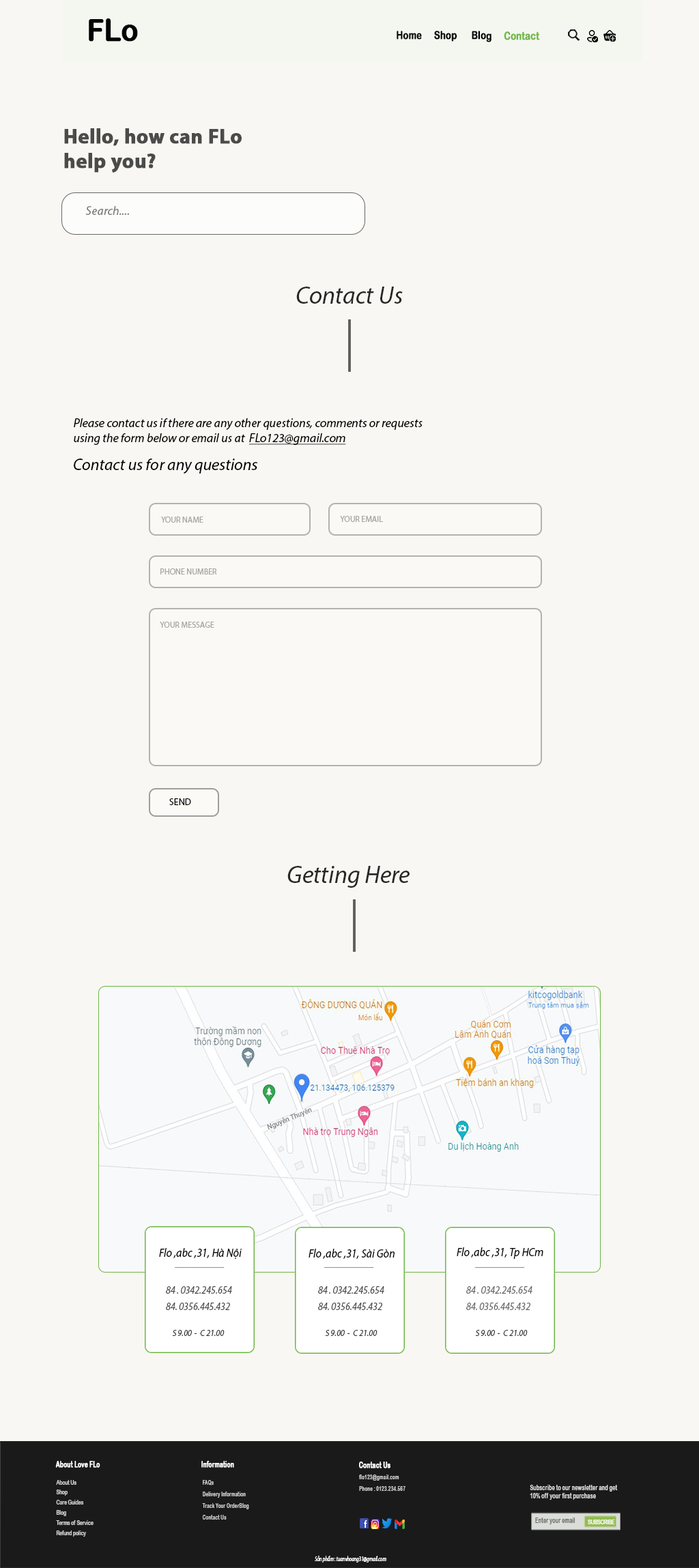
<style>
.page{position:relative;width:699px;height:1568px;background:#f8f7f3}
.page>*{position:absolute;margin:0}
.t1{font:30.6px "ArialRoundedMTBold";color:#020202;font-weight:bold;scale:0.91 1}
.t2{font:10.9px "ArialRoundedMTBold";color:#6fb644;font-weight:bold;scale:0.8 1}
.t3{font:10.9px "ArialRoundedMTBold";color:#090909;font-weight:bold;scale:0.8 1}
.t4{font:10.9px "ArialRoundedMTBold";color:#020202;font-weight:bold;scale:0.8 1}
.t5{font:10.9px "ArialRoundedMTBold";color:#000000;font-weight:bold;scale:0.8 1}
.t6{font:20.5px "MyriadPro-Bold";color:#4b4b4a;font-weight:bold}
.t7{font:12.3px "MyriadPro-It";color:#7d7d7c}
.t8{font:24.6px "MyriadPro-It";color:#272726}
.t9{font:12.3px "MyriadPro-It";color:#000000}
.t10{font:12.3px "MyriadPro-It";color:#000000;text-decoration:underline}
.t11{font:16.4px "MyriadPro-It";color:#000000}
.t12{font:8.2px "MyriadPro-Regular";color:#a8a7a5}
.t13{font:9.6px "MyriadPro-Regular";color:#000000}
.t14{font:12.2px "MyriadPro-It";color:#000000;scale:0.89 1}
.t15{font:12.2px "MyriadPro-It";color:#6fb644;scale:0.89 1}
.t16{font:10.7px/16.4px "MyriadPro-It";color:#4b4b4b;scale:0.89 1}
.t17{font:10.7px/16.4px "MyriadPro-It";color:#676767;scale:0.89 1}
.t18{font:9.2px "MyriadPro-It";color:#3d3d3d;scale:0.89 1}
.t19{font:8.1px "ArialRoundedMTBold";color:#ffffff;font-weight:bold;scale:0.69 1}
.t20{font:6.5px/10.2px "ArialRoundedMTBold";color:#cecece;scale:0.69 1}
.t21{font:6.4px/11.6px "ArialRoundedMTBold";color:#cecece;scale:0.69 1}
.t22{font:7.3px "ArialRoundedMTBold";color:#e2e2e2;scale:0.69 1}
.t23{font:7.3px "ArialRoundedMTBold";color:#686967;scale:0.69 1}
.t24{font:6.5px "ArialRoundedMTBold";color:#ffffff;scale:0.69 1}
.t25{font:6.9px "MyriadPro-It";color:#ffffff;scale:0.66 1}
</style>
<div class="page">
<p class="t1" style="left:89px;top:18px;width:49px;height:24px">FLo</p>
<p class="t2" style="left:396px;top:31px;width:144px;height:11px"><span class="t3">Home     </span><span class="t4">Shop      </span><span class="t5">Blog     </span>Contact</p>
<p class="t6" style="left:64px;top:128px;width:178px;height:45px">Hello, how can FLo <br>help you?</p>
<p class="t7" style="left:85px;top:206px;width:44px;height:9px">Search....</p>
<p class="t8" style="left:296px;top:287px;width:107px;height:17px">Contact Us</p>
<p class="t9" style="left:74px;top:418px;width:348px;height:27px">Please contact us if there are any other questions, comments or requests <br>using the form below or email us at  <span class="t10">FLo123@gmail.com</span></p>
<p class="t11" style="left:74px;top:459px;width:184px;height:15px">Contact us for any questions</p>
<p class="t12" style="left:161px;top:517px;width:42px;height:6px">YOUR NAME</p>
<p class="t12" style="left:340px;top:516px;width:43px;height:6px">YOUR EMAIL</p>
<p class="t12" style="left:160px;top:568px;width:57px;height:7px">PHONE NUMBER</p>
<p class="t12" style="left:160px;top:622px;width:54px;height:6px">YOUR MESSAGE</p>
<p class="t13" style="left:169px;top:798px;width:22px;height:7px">SEND</p>
<p class="t8" style="left:287px;top:866px;width:122px;height:22px">Getting Here</p>
<p class="t14" style="left:159px;top:1248px;width:83px;height:11px">Flo ,abc ,31, Hà Nội</p>
<p class="t14" style="left:308px;top:1249px;width:86px;height:10px">Flo ,abc ,31, Sài Gòn</p>
<p class="t14" style="left:456px;top:1247px;width:87px;height:12px">Flo ,abc ,31, Tp HCm</p>
<p class="t15" style="left:175px;top:1267px;width:49px;height:1px">_________</p>
<p class="t15" style="left:324px;top:1267px;width:50px;height:1px">_________</p>
<p class="t15" style="left:475px;top:1267px;width:50px;height:1px">_________</p>
<p class="t16" style="left:166px;top:1286px;width:66px;height:24px">84 . 0342.245.654<br>84. 0356.445.432</p>
<p class="t16" style="left:318px;top:1286px;width:66px;height:24px">84 . 0342.245.654<br>84. 0356.445.432</p>
<p class="t17" style="left:466px;top:1286px;width:66px;height:24px">84 . 0342.245.654<br>84. 0356.445.432</p>
<p class="t18" style="left:172px;top:1330px;width:52px;height:6px">S 9.00  -  C 21.00</p>
<p class="t18" style="left:325px;top:1330px;width:52px;height:6px">S 9.00  -  C 21.00</p>
<p class="t18" style="left:475px;top:1330px;width:52px;height:6px">S 9.00  -  C 21.00</p>
<p class="t19" style="left:55px;top:1461px;width:45px;height:7px">About Love FLo</p>
<p class="t19" style="left:201px;top:1461px;width:33px;height:7px">Information</p>
<p class="t19" style="left:359px;top:1462px;width:31px;height:6px">Contact Us</p>
<p class="t20" style="left:56px;top:1480px;width:37px;height:57px">About Us<br>Shop<br>Care Guides<br>Blog<br>Terms of Service<br>Refund policy</p>
<p class="t21" style="left:202px;top:1480px;width:47px;height:40px">FAQs<br>Delivery Information<br>Track Your OrderBlog<br>Contact Us</p>
<p class="t21" style="left:359px;top:1475px;width:46px;height:16px">flo123@gmail.com<br>Phone : 0123.234.567</p>
<p class="t22" style="left:529px;top:1485px;width:89px;height:15px">Subscribe to our newsletter and get<br>10% off your first purchase</p>
<p class="t23" style="left:535px;top:1518px;width:40px;height:6px">Enter your email</p>
<p class="t24" style="left:587px;top:1520px;width:28px;height:4px">SUBSCRIBE</p>
<p class="t25" style="left:315px;top:1556px;width:71px;height:7px">Sản phẩm : tuanvhoang31@gmail.com</p>
</div>
